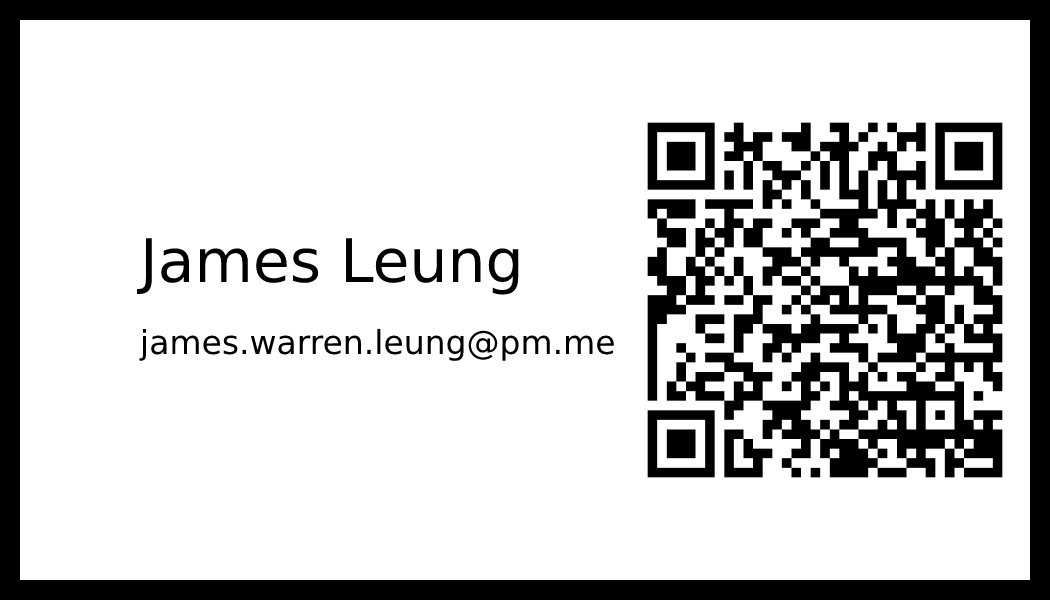
<style>
.page{position:relative;width:1050px;height:600px;background:#ffffff}
.page>*{position:absolute;margin:0}
.t1{font:33px "DejaVuSans";color:#000000}
.t2{font:60px "DejaVuSans";color:#000000}
</style>
<div class="page">
<p class="t1" style="left:136px;top:238px;width:478px;height:123px"><span class="t2">James Leung<br></span>james.warren.leung@pm.me</p>
</div>
